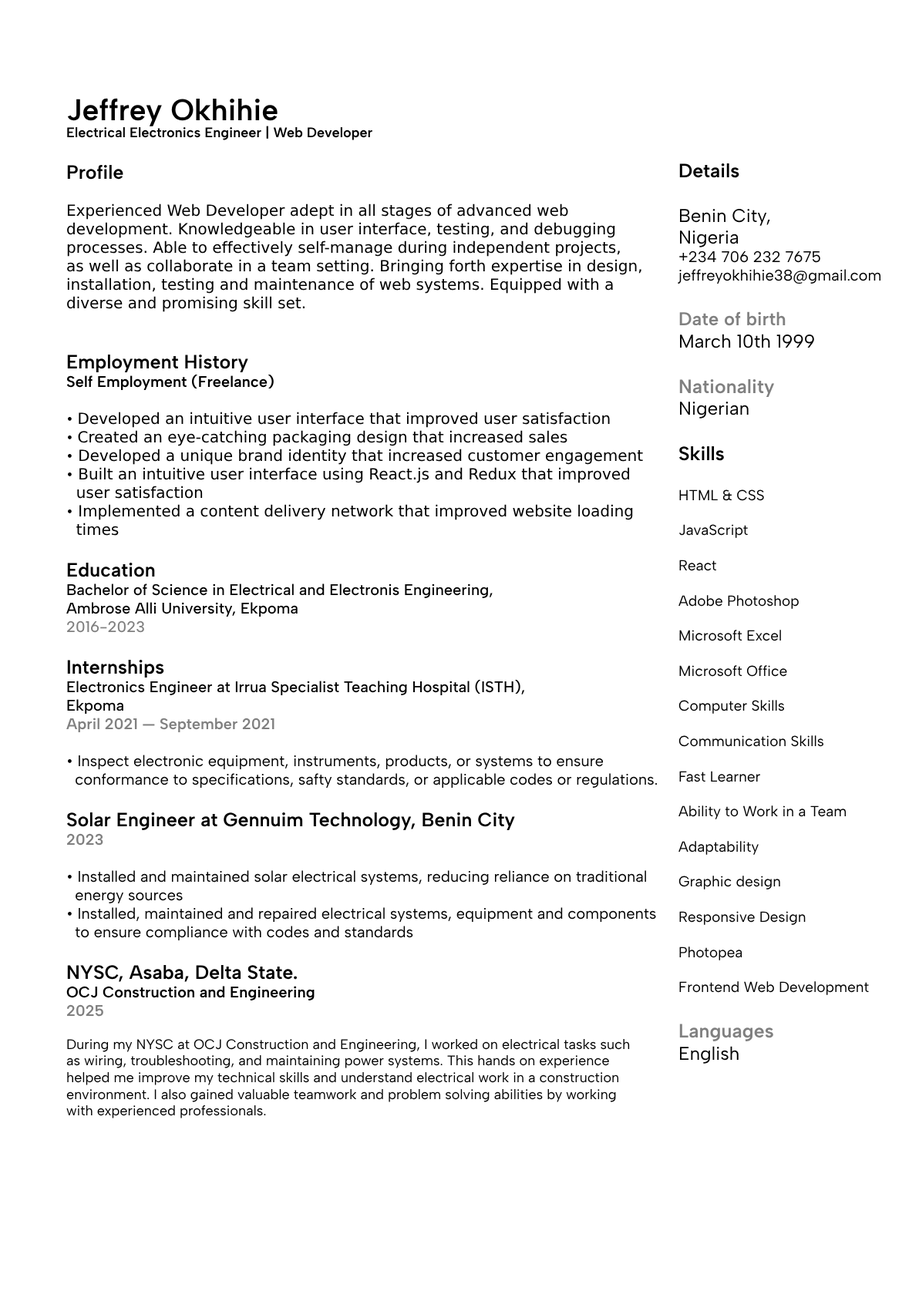
<style>
.page{position:relative;width:919px;height:1298px;background:#ffffff}
.page>*{position:absolute;margin:0}
.t1{font:15.4px "DejaVuSans";color:#000000}
.t2{font:30.1px "AlbertSans-SemiBold";color:#000000}
.t3{font:13.9px "AlbertSans-SemiBold";color:#000000}
.t4{font:19.3px "AlbertSans-SemiBold";color:#000000}
.t5{font:15.4px "AlbertSans-SemiBold";color:#000000}
.t6{font:15.4px "AlbertSans-Regular";color:#000000}
.t7{font:15.4px "AlbertSans-Medium";color:#000000}
.t8{font:15.4px "AlbertSans-Medium";color:#808080}
.t9{font:15.4px "AlbertSans-SemiBold";color:#808080}
.t10{font:13.9px "AlbertSans-Regular";color:#000000}
.t11{font:14.6px "AlbertSans-Regular";color:#000000}
.t12{font:18.5px "AlbertSans-Regular";color:#000000}
.t13{font:18.5px "AlbertSans-SemiBold";color:#808080}
.t14{font:19.3px "AlbertSans-SemiBold";color:#808080}
</style>
<div class="page">
<p class="t1" style="left:66px;top:98px;width:591px;height:1020px"><span class="t2">Jeffrey Okhihie<br></span><span class="t3">Electrical Electronics Engineer | Web Developer<br><br></span><span class="t4">Profile<br><br></span>Experienced Web Developer adept in all stages of advanced web <br>development. Knowledgeable in user interface, testing, and debugging<br>processes. Able to effectively self-manage during independent projects,<br>as well as collaborate in a team setting. Bringing forth expertise in design,<br>installation, testing and maintenance of web systems. Equipped with a <br>diverse and promising skill set.<br><br><br><span class="t4">Employment History<br></span><span class="t5">Self Employment (Freelance)<br><br></span><span class="t6">• </span>Developed an intuitive user interface that improved user satisfaction<br><span class="t6">• </span>Created an eye-catching packaging design that increased sales<br><span class="t6">• </span>Developed a unique brand identity that increased customer engagement<br><span class="t6">• </span>Built an intuitive user interface using React.js and Redux that improved <br>  user satisfaction<br><span class="t6">• </span>Implemented a content delivery network that improved website loading <br>  times<br><br><span class="t4">Education<br></span><span class="t7">Bachelor of Science in Electrical and Electronis Engineering,<br>Ambrose Alli University, Ekpoma<br></span><span class="t8">2016-2023<br><br></span><span class="t4">Internships<br></span><span class="t7">Electronics Engineer at Irrua Specialist Teaching Hospital (ISTH),<br>Ekpoma<br></span><span class="t9">April 2021 — September 2021<br></span><span class="t6"><br>• Inspect electronic equipment, instruments, products, or systems to ensure <br>  conformance to specifications, safty standards, or applicable codes or regulations.<br><br></span><span class="t4">Solar Engineer at Gennuim Technology, Benin City<br></span><span class="t9">2023</span><span class="t6"><br><br>• Installed and maintained solar electrical systems, reducing reliance on traditional<br>  energy sources<br>• Installed, maintained and repaired electrical systems, equipment and components<br>  to ensure compliance with codes and standards<br><br></span><span class="t4">NYSC, Asaba, Delta State.<br></span><span class="t5">OCJ Construction and Engineering<br></span><span class="t9">2025<br><br></span><span class="t10">During my NYSC at OCJ Construction and Engineering, I worked on electrical tasks such <br>as wiring, troubleshooting, and maintaining power systems. This hands on experience<br>helped me improve my technical skills and understand electrical work in a construction <br>environment. I also gained valuable teamwork and problem solving abilities by working <br>with experienced professionals.</span></p>
<p class="t11" style="left:677px;top:163px;width:204px;height:901px"><span class="t4">Details<br></span><span class="t12"><br>Benin City,<br>Nigeria<br></span><span class="t6">+234 706 232 7675<br>jeffreyokhihie38@gmail.com<br><br></span><span class="t13">Date of birth</span><span class="t12"><br>March 10th 1999<br><br></span><span class="t14">Nationality</span><span class="t12"><br>Nigerian<br><br></span><span class="t4">Skills<br><br></span>HTML &amp; CSS<br><br>JavaScript<br><br>React<br><br>Adobe Photoshop<br><br>Microsoft Excel<br><br>Microsoft Office<br><br>Computer Skills<br><br>Communication Skills<br><br>Fast Learner<br><br>Ability to Work in a Team<br><br>Adaptability<br><br>Graphic design<br><br>Responsive Design<br><br>Photopea<br><br>Frontend Web Development<br><br><span class="t14">Languages<br></span><span class="t12">English</span></p>
</div>
